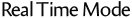
<style>
.page{position:relative;width:132px;height:18px;background:#ffffff}
.page>*{position:absolute;margin:0}
.t1{font:20px "Amira-Roman";letter-spacing:-0.025em;color:#000000}
</style>
<div class="page">
<p class="t1" style="left:2px;top:1px;width:128px;height:16px;opacity:0.96">Real Time Mode</p>
</div>
